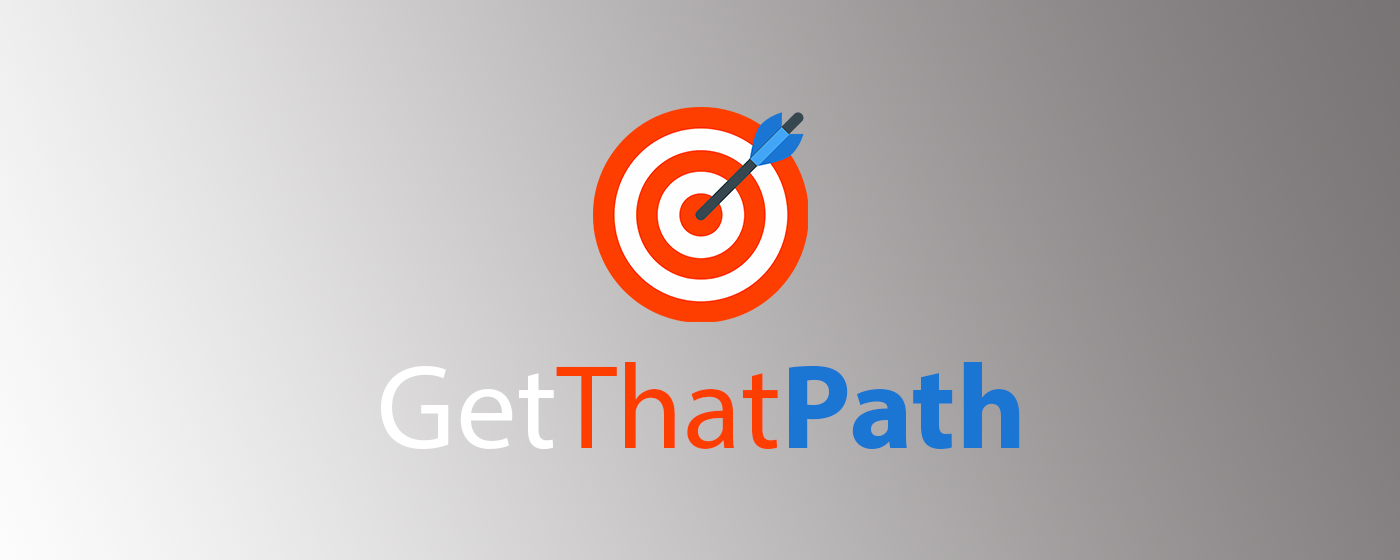
<style>
.page{position:relative;width:1400px;height:560px}
.page>*{position:absolute;margin:0}
.t1{font:120.8px "MyriadPro-Regular";color:#fe3d01}
.t2{font:120.8px "MyriadPro-Regular";color:#ffffff}
.t3{font:120.8px "MyriadPro-Bold";color:#1a76d2}
</style>
<div class="page">
<p class="t1" style="left:381px;top:362px;width:639px;height:87px"><span class="t2">Get</span>That<span class="t3">Path</span></p>
</div>
